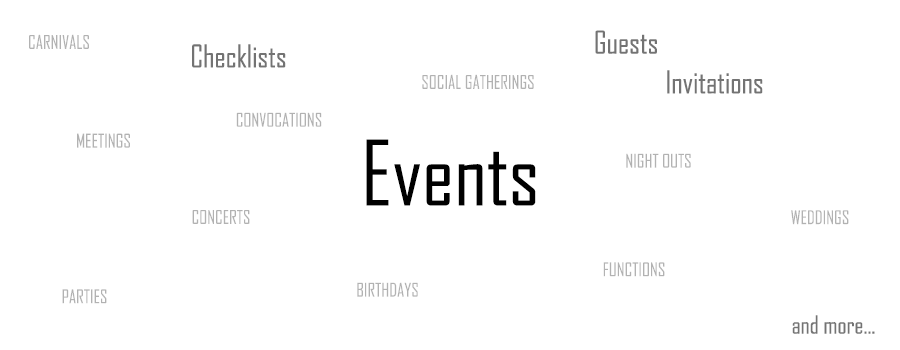
<style>
.page{position:relative;width:900px;height:350px;background:#ffffff}
.page>*{position:absolute;margin:0}
.t1{font:30px "AgencyFB-Reg";color:#737373}
.t2{font:18px "AgencyFB-Reg";color:#b2b2b2;text-transform:uppercase}
.t3{font:86.1px "AgencyFB-Reg";color:#000000}
.t4{font:24px "AgencyFB-Reg";color:#737373}
</style>
<div class="page">
<p class="t1" style="left:595px;top:30px;width:62px;height:24px">Guests</p>
<p class="t2" style="left:29px;top:34px;width:60px;height:15px">Carnivals</p>
<p class="t1" style="left:192px;top:44px;width:94px;height:24px">Checklists</p>
<p class="t2" style="left:422px;top:74px;width:112px;height:15px">Social gatherings</p>
<p class="t1" style="left:667px;top:70px;width:96px;height:24px">Invitations</p>
<p class="t2" style="left:236px;top:112px;width:86px;height:15px">Convocations</p>
<p class="t2" style="left:77px;top:133px;width:53px;height:15px">Meetings</p>
<p class="t3" style="left:366px;top:139px;width:170px;height:67px">Events</p>
<p class="t2" style="left:626px;top:153px;width:65px;height:15px">Night outs</p>
<p class="t2" style="left:192px;top:210px;width:58px;height:14px">Concerts</p>
<p class="t2" style="left:791px;top:210px;width:58px;height:15px">Weddings</p>
<p class="t2" style="left:603px;top:262px;width:62px;height:15px">Functions</p>
<p class="t2" style="left:62px;top:289px;width:45px;height:15px">Parties</p>
<p class="t2" style="left:357px;top:282px;width:61px;height:15px">Birthdays</p>
<p class="t4" style="left:792px;top:315px;width:83px;height:19px">and more...</p>
</div>
